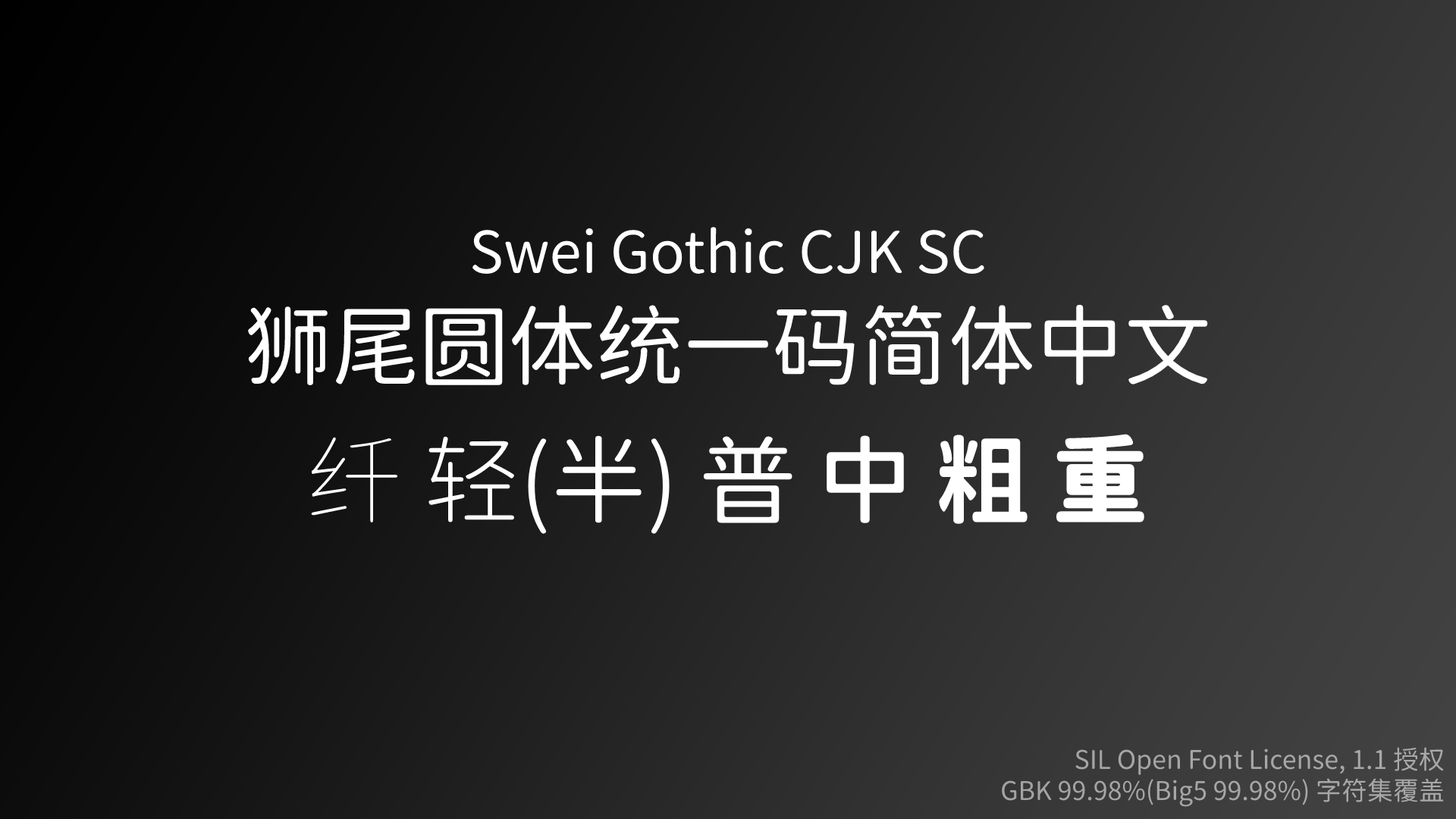
<style>
.page{position:relative;width:1456px;height:819px}
.page>*{position:absolute;margin:0}
.t1{font:57.6px "SweiGothicCJKsc-Regular";color:#ffffff}
.t2{font:88px "SweiGothicCJKsc-Regular";color:#ffffff}
.t3{font:95.5px "SweiGothicCJKsc-DemiLight";color:#ffffff}
.t4{font:95.5px "SweiGothicCJKsc-Thin";color:#ffffff}
.t5{font:95.5px "SweiGothicCJKsc-Light";color:#ffffff}
.t6{font:95.5px "SweiGothicCJKsc-Regular";color:#ffffff}
.t7{font:95.5px "SweiGothicCJKsc-Medium";color:#ffffff}
.t8{font:95.5px "SweiGothicCJKsc-Bold";color:#ffffff}
.t9{font:95.5px "SweiGothicCJKsc-Black";color:#ffffff}
.t10{font:25.8px "SweiGothicCJKsc-Regular";color:#a6a6a6}
</style>
<div class="page">
<p class="t1" style="left:247px;top:227px;width:962px;height:158px;text-align:center">Swei Gothic CJK SC<br><span class="t2">狮尾圆体统一码简体中文</span></p>
<p class="t3" style="left:311px;top:434px;width:833px;height:101px"><span class="t4">纤 </span><span class="t5">轻</span>(半) <span class="t6">普 </span><span class="t7">中 </span><span class="t8">粗 </span><span class="t9">重</span></p>
<p class="t10" style="left:1002px;top:747px;width:442px;height:60px;text-align:right">SIL Open Font License, 1.1 授权<br> GBK 99.98%(Big5 99.98%) 字符集覆盖</p>
</div>
